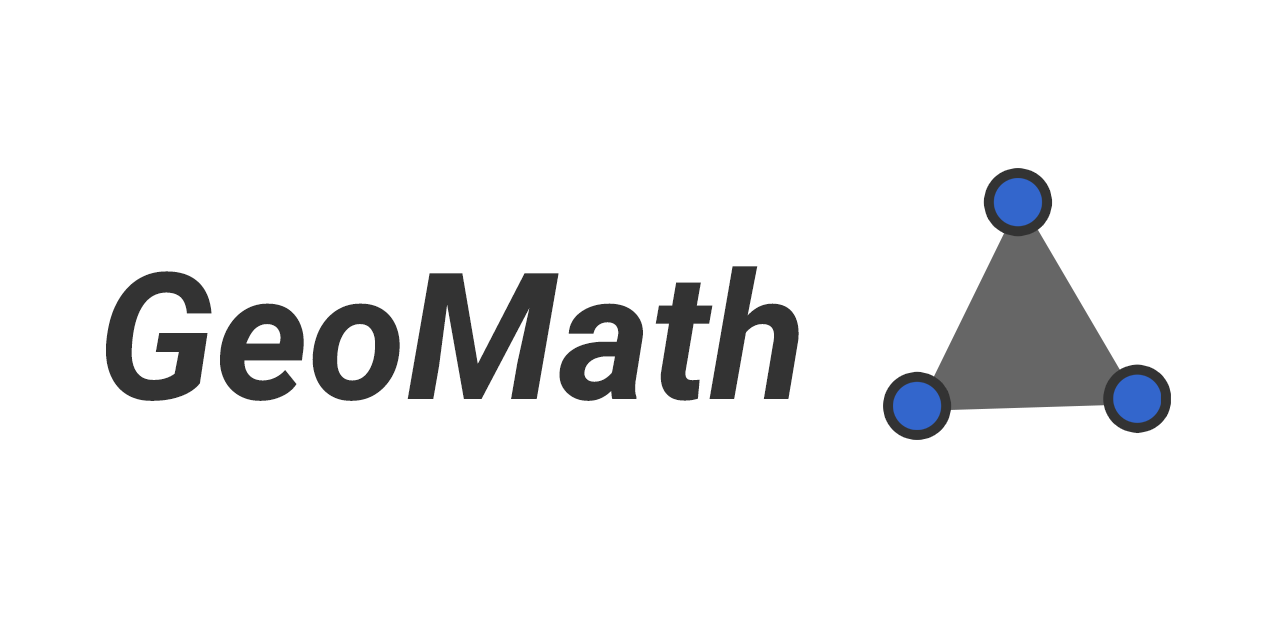
<style>
.page{position:relative;width:1280px;height:629px;background:#ffffff}
.page>*{position:absolute;margin:0}
.t1{font:177px "Roboto-BoldItalic";color:#333333}
</style>
<div class="page">
<p class="t1" style="left:106px;top:266px;width:693px;height:135px">GeoMath</p>
</div>
